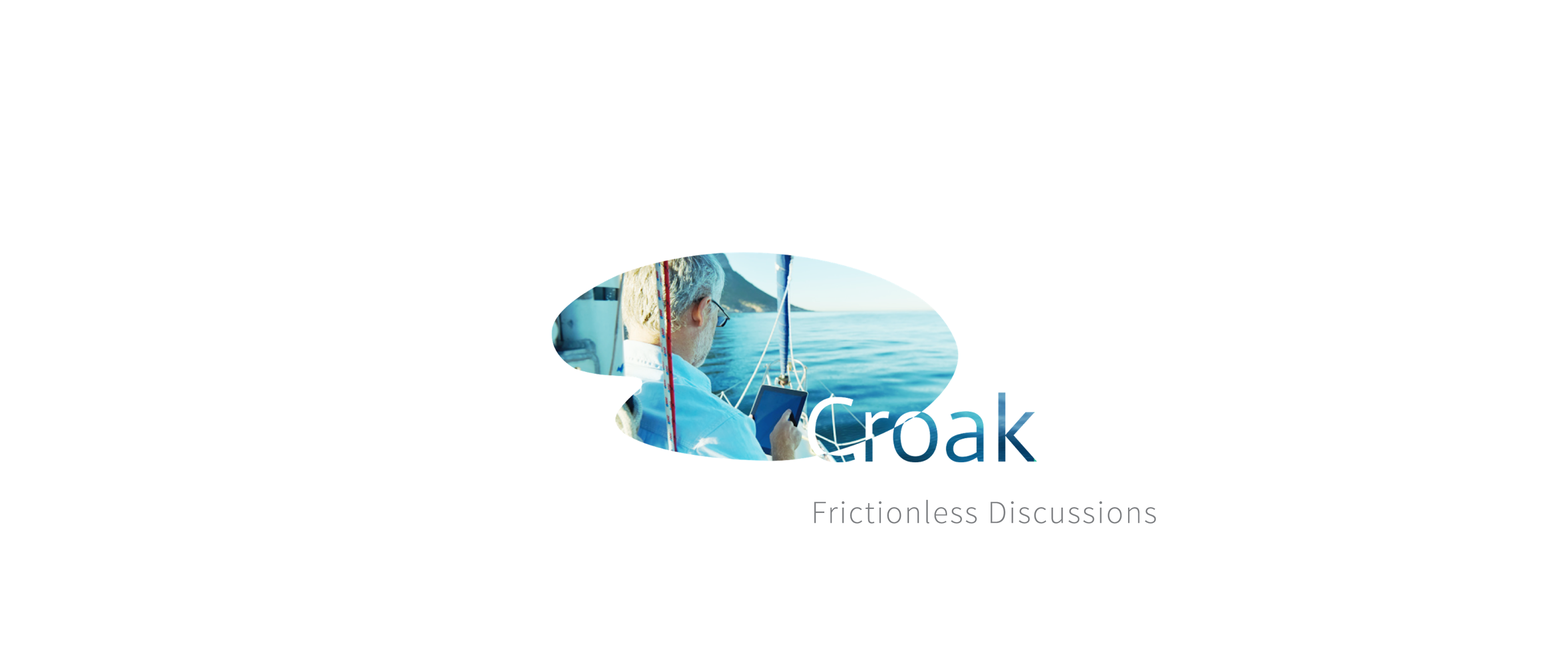
<style>
.page{position:relative;width:1568px;height:672px;background:#ffffff}
.page>*{position:absolute;margin:0}
.t1{font:32.1px "SourceSansPro-Light";letter-spacing:0.055em;color:#808285}
</style>
<div class="page">
<p class="t1" style="left:814px;top:500px;width:342px;height:24px">Frictionless Discussions</p>
</div>
